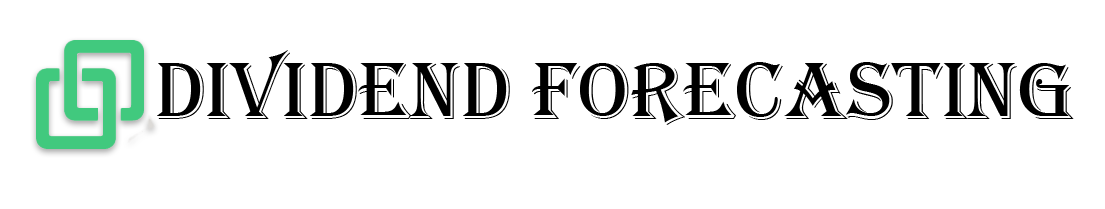
<style>
.page{position:relative;width:1105px;height:209px;background:#ffffff}
.page>*{position:absolute;margin:0}
.t1{font:83.6px "Algerian";color:#000000}
</style>
<div class="page">
<p class="t1" style="left:157px;top:50px;width:917px;height:75px">dIVIDEND FORECASTING</p>
</div>
